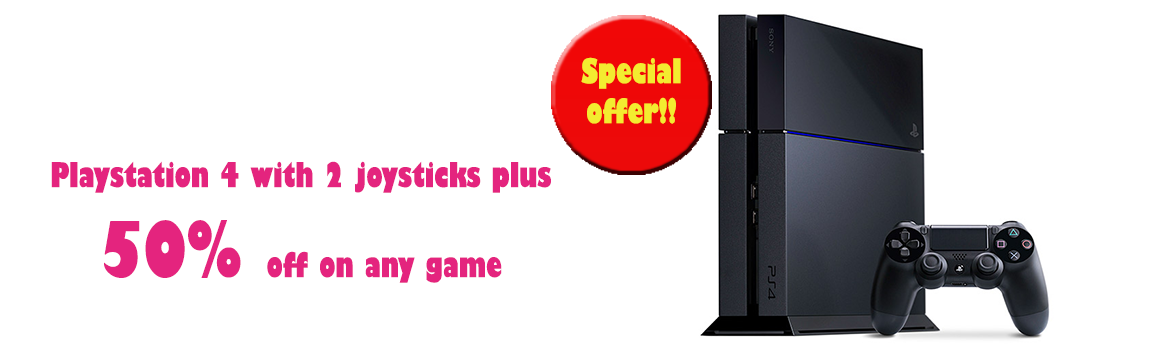
<style>
.page{position:relative;width:1150px;height:350px;background:#ffffff}
.page>*{position:absolute;margin:0}
.t1{font:33.3px "GillSans-UltraBoldCondensed";color:#f3ec30}
.t2{font:33.3px "GillSans-UltraBoldCondensed";color:#e4247e}
.t3{font:75px "GillSans-UltraBoldCondensed";color:#e4247e}
</style>
<div class="page">
<p class="t1" style="left:581px;top:57px;width:100px;height:67px;text-align:center">Special    offer!!</p>
<p class="t2" style="left:51px;top:161px;width:500px;height:122px;text-align:center">Playstation 4 with 2 joysticks plus <br><span class="t3">50% </span>off on any game</p>
</div>
